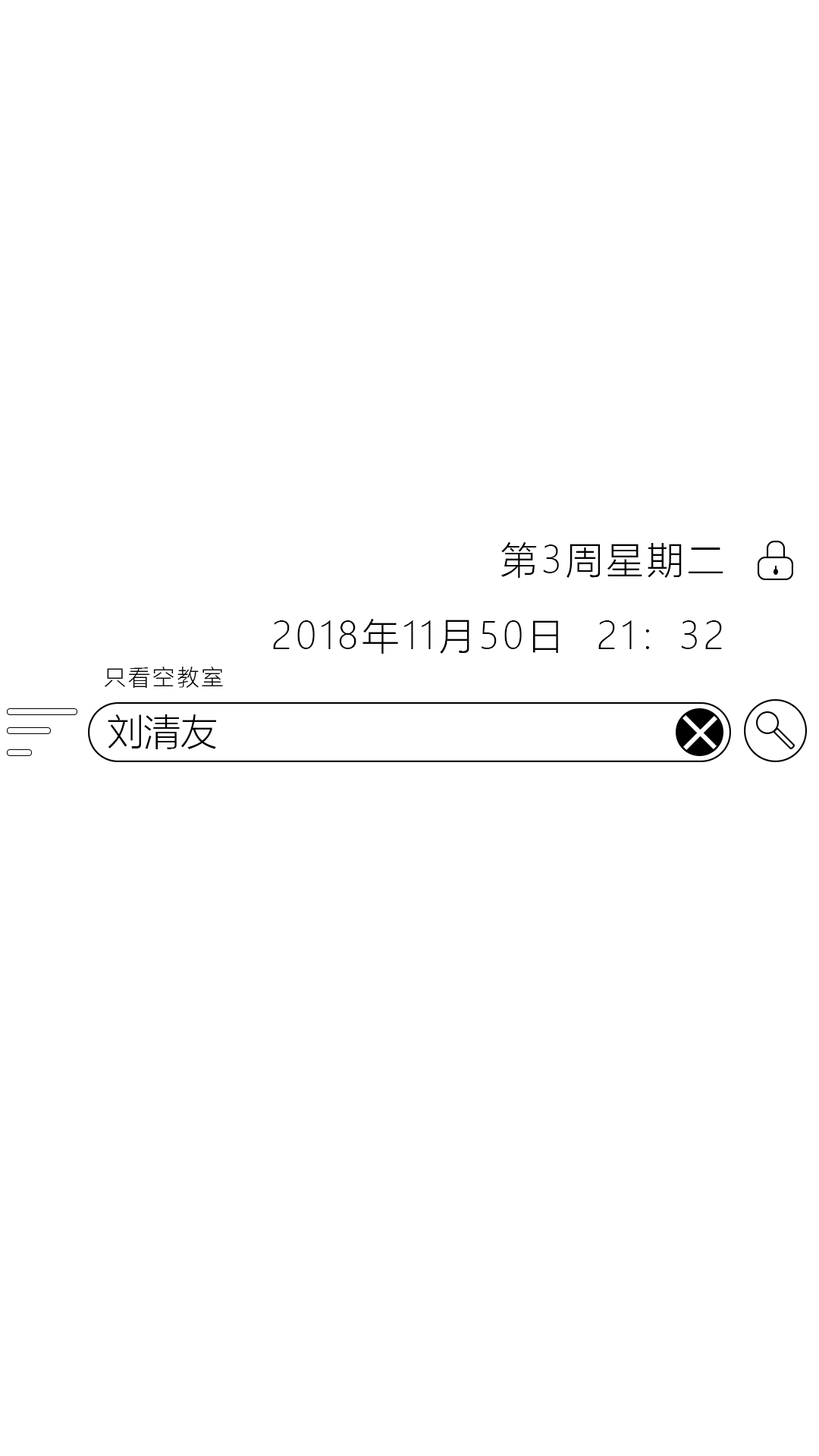
<style>
.page{position:relative;width:819px;height:1456px;background:#ffffff}
.page>*{position:absolute;margin:0}
.t1{font:36.9px "MicrosoftYaHeiUILight";letter-spacing:0.1em;color:#000000}
.t2{font:22.1px "MicrosoftYaHeiUILight";letter-spacing:0.1em;color:#000000}
.t3{font:36.9px "MicrosoftYaHeiUILight";color:#000000}
</style>
<div class="page">
<p class="t1" style="left:501px;top:542px;width:222px;height:36px">第3周星期二</p>
<p class="t1" style="left:273px;top:619px;width:449px;height:35px">2018年11月50日  21：32</p>
<p class="t2" style="left:105px;top:667px;width:118px;height:21px">只看空教室</p>
<p class="t3" style="left:108px;top:714px;width:108px;height:35px">刘清友</p>
</div>
